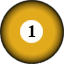
<style>
.page{position:relative;width:64px;height:64px;background:#e1aa1d}
.page>*{position:absolute;margin:0}
.t1{font:18px "TimesNewRomanPS-BoldMT";color:#000000}
</style>
<div class="page">
<p class="t1" style="left:28px;top:25px;width:8px;height:12px">1</p>
</div>
